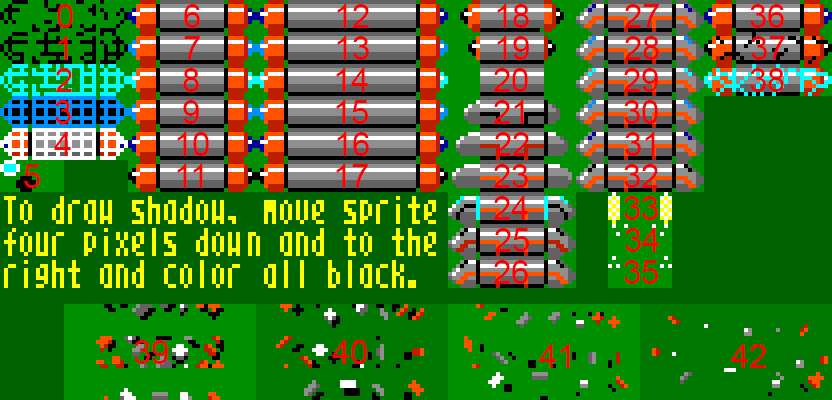
<style>
.page{position:relative;width:832px;height:400px;background:#006200}
.page>*{position:absolute;margin:0}
.t1{font:33px "ArialMT";color:#fe0000}
</style>
<div class="page">
<p class="t1" style="left:57px;top:4px;width:16px;height:24px">0</p>
<p class="t1" style="left:184px;top:4px;width:16px;height:24px">6</p>
<p class="t1" style="left:337px;top:4px;width:32px;height:24px">12</p>
<p class="t1" style="left:497px;top:4px;width:32px;height:24px">18</p>
<p class="t1" style="left:625px;top:4px;width:34px;height:24px">27</p>
<p class="t1" style="left:750px;top:4px;width:34px;height:24px">36</p>
<p class="t1" style="left:58px;top:36px;width:10px;height:24px">1</p>
<p class="t1" style="left:184px;top:36px;width:16px;height:24px">7</p>
<p class="t1" style="left:337px;top:36px;width:32px;height:24px">13</p>
<p class="t1" style="left:497px;top:36px;width:32px;height:24px">19</p>
<p class="t1" style="left:625px;top:36px;width:34px;height:24px">28</p>
<p class="t1" style="left:751px;top:36px;width:34px;height:24px">37</p>
<p class="t1" style="left:56px;top:68px;width:16px;height:24px">2</p>
<p class="t1" style="left:183px;top:68px;width:16px;height:24px">8</p>
<p class="t1" style="left:336px;top:68px;width:32px;height:24px">14</p>
<p class="t1" style="left:494px;top:68px;width:34px;height:24px">20</p>
<p class="t1" style="left:624px;top:68px;width:34px;height:24px">29</p>
<p class="t1" style="left:750px;top:68px;width:34px;height:24px">38</p>
<p class="t1" style="left:55px;top:100px;width:16px;height:24px">3</p>
<p class="t1" style="left:183px;top:100px;width:16px;height:24px">9</p>
<p class="t1" style="left:336px;top:100px;width:32px;height:24px">15</p>
<p class="t1" style="left:494px;top:100px;width:30px;height:24px">21</p>
<p class="t1" style="left:624px;top:100px;width:34px;height:24px">30</p>
<p class="t1" style="left:54px;top:132px;width:17px;height:24px">4</p>
<p class="t1" style="left:177px;top:132px;width:32px;height:24px">10</p>
<p class="t1" style="left:337px;top:132px;width:32px;height:24px">16</p>
<p class="t1" style="left:495px;top:132px;width:34px;height:24px">22</p>
<p class="t1" style="left:625px;top:132px;width:30px;height:24px">31</p>
<p class="t1" style="left:24px;top:164px;width:16px;height:24px">5</p>
<p class="t1" style="left:177px;top:164px;width:26px;height:24px">11</p>
<p class="t1" style="left:336px;top:164px;width:32px;height:24px">17</p>
<p class="t1" style="left:494px;top:164px;width:34px;height:24px">23</p>
<p class="t1" style="left:624px;top:164px;width:34px;height:24px">32</p>
<p class="t1" style="left:494px;top:196px;width:34px;height:24px">24</p>
<p class="t1" style="left:624px;top:196px;width:34px;height:24px">33</p>
<p class="t1" style="left:495px;top:228px;width:34px;height:24px">25</p>
<p class="t1" style="left:625px;top:228px;width:34px;height:24px">34</p>
<p class="t1" style="left:494px;top:260px;width:34px;height:24px">26</p>
<p class="t1" style="left:624px;top:260px;width:34px;height:24px">35</p>
<p class="t1" style="left:134px;top:340px;width:34px;height:24px">39</p>
<p class="t1" style="left:332px;top:340px;width:35px;height:24px">40</p>
<p class="t1" style="left:539px;top:344px;width:31px;height:24px">41</p>
<p class="t1" style="left:731px;top:344px;width:35px;height:24px">42</p>
</div>
